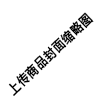
<style>
.page{position:relative;width:100px;height:100px;background:#ffffff}
.page>*{position:absolute;margin:0}
.t1{font:12.8px "MicrosoftYaHei";letter-spacing:0.1em;color:#000000;text-transform:uppercase;font-weight:bold;scale:0.86 1}
</style>
<div class="page">
<p class="t1" style="left:8px;top:12px;width:86px;height:84px;rotate:-44deg">上传商品封面缩略图</p>
</div>
